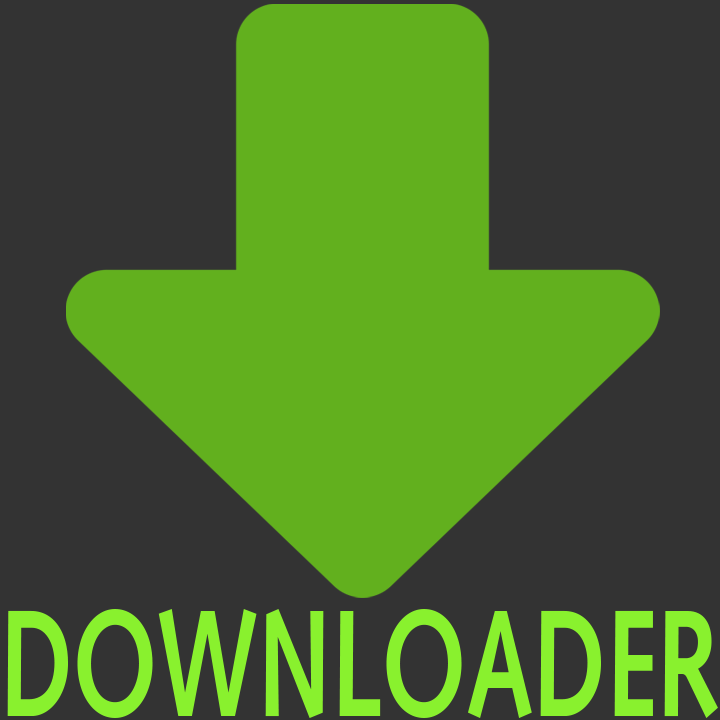
<style>
.page{position:relative;width:720px;height:720px;background:#333333}
.page>*{position:absolute;margin:0}
.t1{font:151.8px "Syntax-Bold";color:#89f12e;font-variant:small-caps;scale:0.67 1}
</style>
<div class="page">
<p class="t1" style="left:7px;top:609px;width:711px;height:109px">DOWNLOADER</p>
</div>
